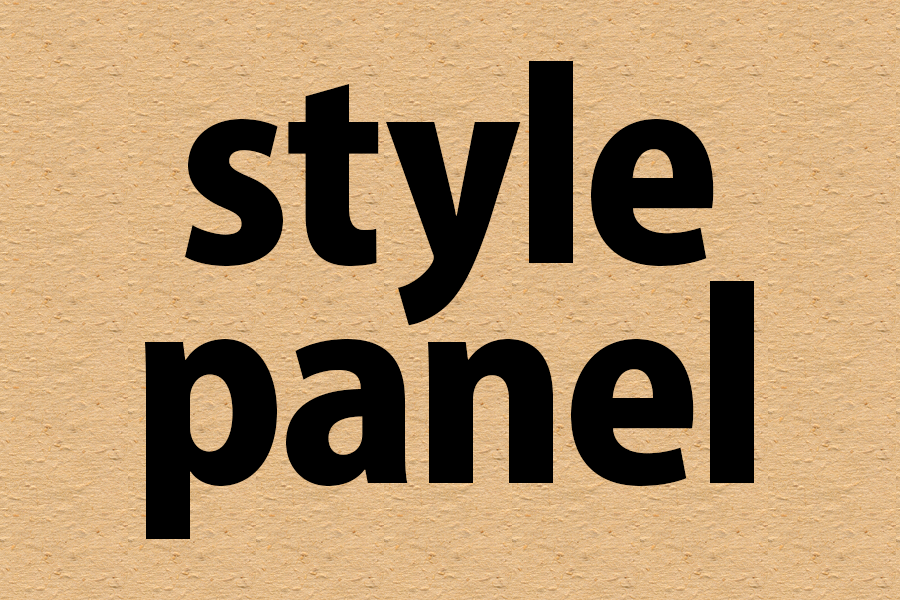
<style>
.page{position:relative;width:900px;height:600px;background:#000000}
.page>*{position:absolute;margin:0}
.t1{font:250px/220px "KozGoPro-Heavy";letter-spacing:-0.025em;color:#000000}
.t2{font:250px/220px "KozGoPro-Heavy";color:#000000}
</style>
<div class="page">
<p class="t1" style="left:145px;top:61px;width:609px;height:478px;text-align:center">s<span class="t2">t</span>yle<br>panel</p>
</div>
